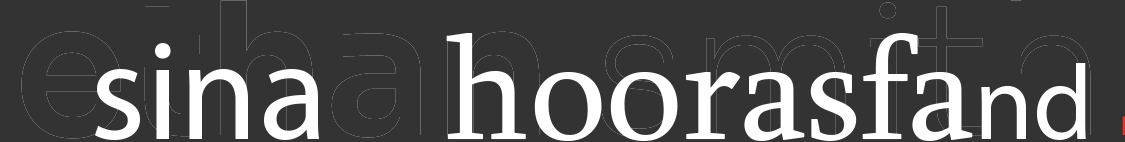
<style>
.page{position:relative;width:1125px;height:142px;background:#333333}
.page>*{position:absolute;margin:0}
.t1{font:150px "Sylfaen";color:#ffffff}
.t2{font:150px "MyriadArabic-Regular";color:#ffffff}
.t3{font:200px "MyriadArabic-Regular";color:#ffffff}
</style>
<div class="page">
<p class="t1" style="left:446px;top:33px;width:640px;height:108px">hoorasfa<span class="t2">nd</span></p>
<p class="t3" style="left:95px;top:43px;width:224px;height:98px">sina</p>
</div>
